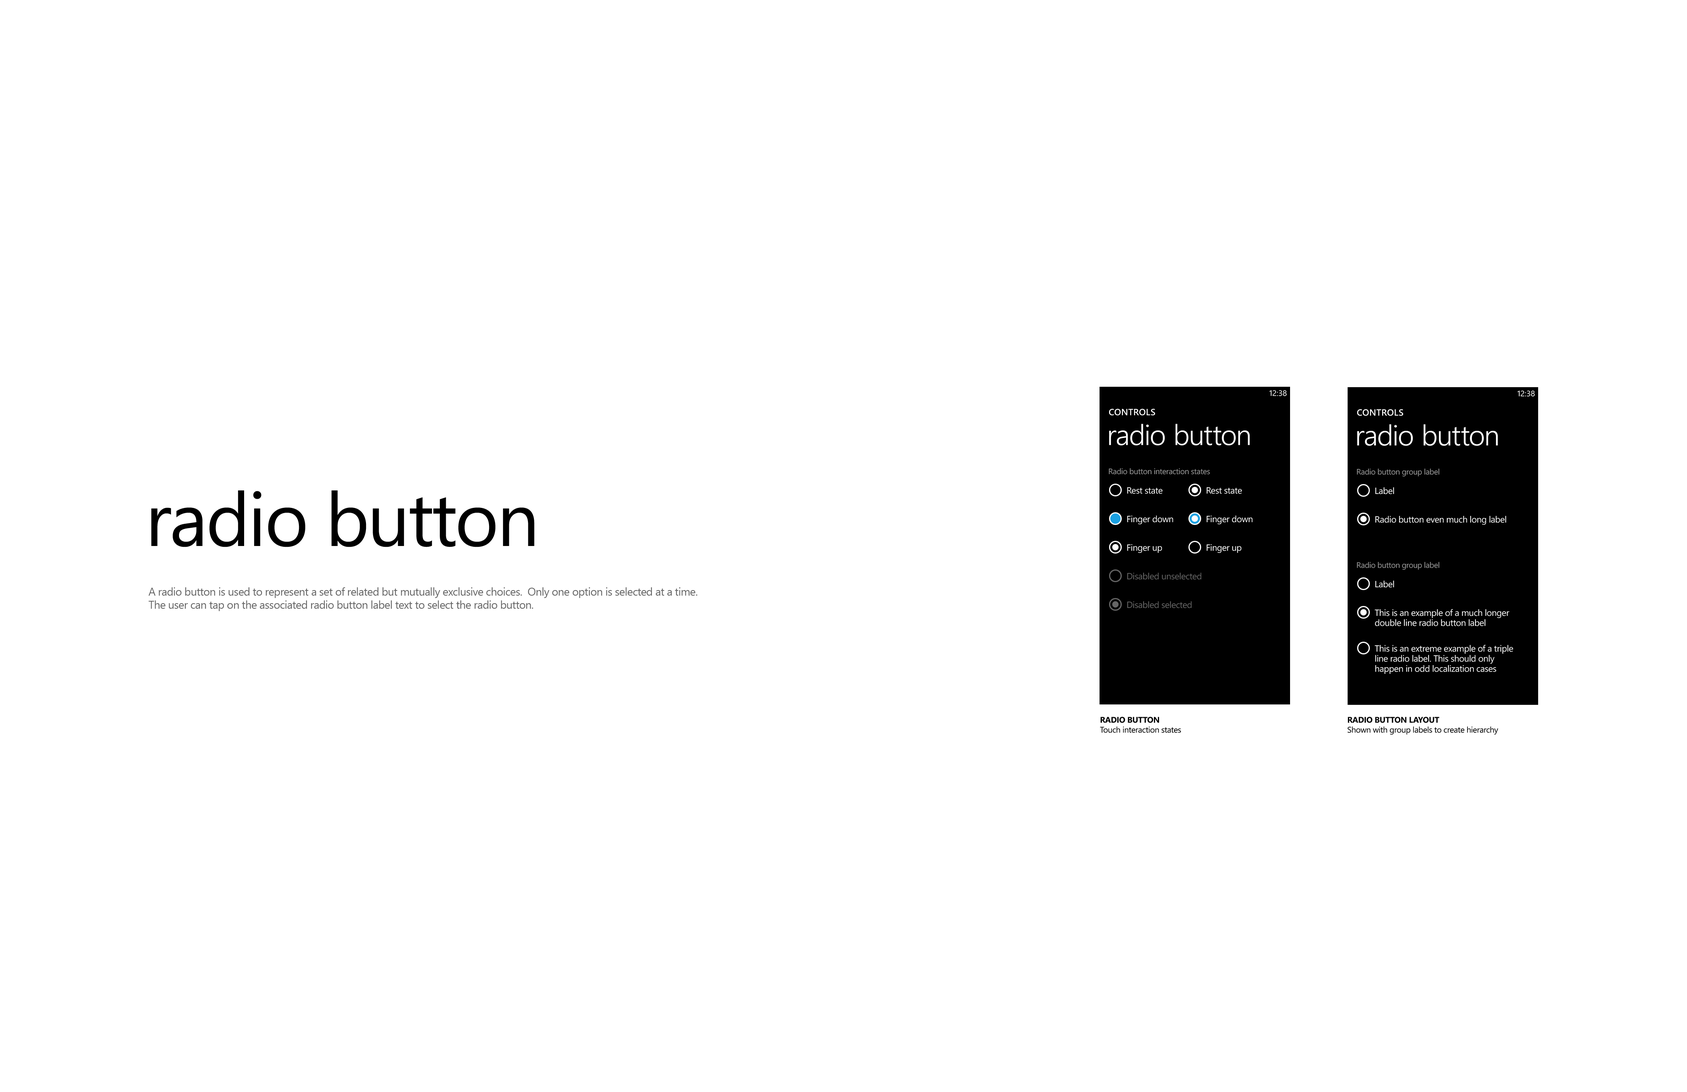
<style>
.page{position:relative;width:1687px;height:1092px;background:#ffffff}
.page>*{position:absolute;margin:0}
.t1{font:7.9px "SegoeWP";color:#ffffff}
.t2{font:9px "SegoeWP-Semibold";letter-spacing:0.025em;color:#ffffff;text-transform:uppercase}
.t3{font:28.6px "SegoeWP-SemiLight";letter-spacing:-0.01em;color:#ffffff}
.t4{font:7.9px "SegoeWP";letter-spacing:-0.025em;color:#999999}
.t5{font:75.2px "SegoeWP";letter-spacing:-0.025em;color:#000000}
.t6{font:9px "SegoeWP";letter-spacing:-0.025em;color:#ffffff}
.t7{font:9px "SegoeWP";letter-spacing:-0.025em;color:#666666}
.t8{font:11px "SegoeUI";letter-spacing:-0.025em;color:#666666}
.t9{font:9px/10.1px "SegoeWP";letter-spacing:-0.025em;color:#ffffff}
.t10{font:8.3px "SegoeWP";letter-spacing:-0.025em;color:#000000}
.t11{font:8.3px "SegoeWP-Bold";letter-spacing:-0.025em;color:#000000;text-transform:uppercase}
</style>
<div class="page">
<p class="t1" style="left:1270px;top:390px;width:17px;height:6px">12:38</p>
<p class="t1" style="left:1518px;top:390px;width:17px;height:7px">12:38</p>
<p class="t2" style="left:1109px;top:409px;width:46px;height:6px">controls</p>
<p class="t2" style="left:1358px;top:409px;width:46px;height:7px">controls</p>
<p class="t3" style="left:1109px;top:424px;width:141px;height:21px">radio button</p>
<p class="t3" style="left:1358px;top:424px;width:140px;height:22px">radio button</p>
<p class="t4" style="left:1109px;top:468px;width:101px;height:6px">Radio button interaction states</p>
<p class="t4" style="left:1357px;top:469px;width:83px;height:7px">Radio button group label</p>
<p class="t5" style="left:151px;top:490px;width:383px;height:57px">radio button</p>
<p class="t6" style="left:1128px;top:487px;width:35px;height:7px">Rest state</p>
<p class="t6" style="left:1207px;top:487px;width:35px;height:7px">Rest state</p>
<p class="t6" style="left:1376px;top:487px;width:18px;height:7px">Label</p>
<p class="t6" style="left:1128px;top:515px;width:46px;height:10px">Finger down</p>
<p class="t6" style="left:1207px;top:515px;width:46px;height:10px">Finger down</p>
<p class="t6" style="left:1376px;top:516px;width:131px;height:9px">Radio button even much long label</p>
<p class="t6" style="left:1128px;top:544px;width:35px;height:9px">Finger up</p>
<p class="t6" style="left:1207px;top:544px;width:35px;height:9px">Finger up</p>
<p class="t4" style="left:1357px;top:562px;width:83px;height:8px">Radio button group label</p>
<p class="t7" style="left:1128px;top:573px;width:74px;height:7px">Disabled unselected</p>
<p class="t6" style="left:1376px;top:580px;width:18px;height:8px">Label</p>
<p class="t8" style="left:148px;top:587px;width:550px;height:24px">A radio button is used to represent a set of related but mutually exclusive choices.  Only one option is selected at a time.  The user can tap on the associated radio button label text to select the radio button.</p>
<p class="t7" style="left:1128px;top:601px;width:64px;height:7px">Disabled selected</p>
<p class="t9" style="left:1375px;top:609px;width:135px;height:17px">This is an example of a much longer<br>double line radio button label</p>
<p class="t9" style="left:1375px;top:645px;width:139px;height:29px">This is an extreme example of a triple<br>line radio label. This should only<br>happen in odd localization cases</p>
<p class="t10" style="left:1100px;top:717px;width:81px;height:16px"><span class="t11">radio button<br></span>Touch interaction states</p>
<p class="t10" style="left:1348px;top:717px;width:151px;height:18px"><span class="t11">radio button layout<br></span>Shown with group labels to create hierarchy</p>
</div>
